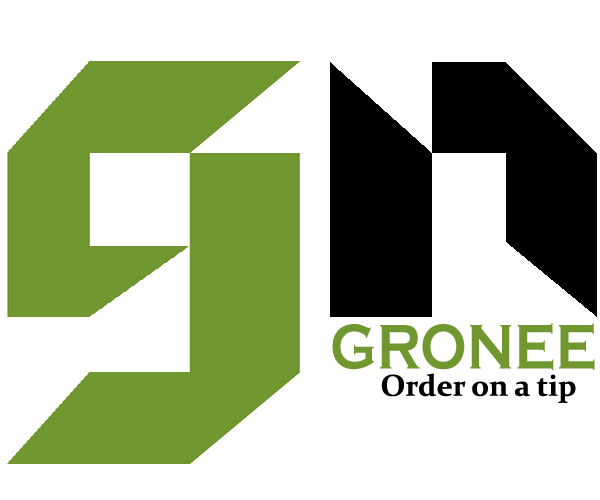
<style>
.page{position:relative;width:600px;height:500px;background:#ffffff}
.page>*{position:absolute;margin:0}
.t1{font:65.5px "CopperplateGothic-Bold";color:#719830;scale:0.83 1}
.t2{font:30px "Constantia-Bold";color:#000000}
</style>
<div class="page">
<p class="t1" style="left:332px;top:323px;width:263px;height:48px">GRONEE</p>
<p class="t2" style="left:381px;top:373px;width:195px;height:30px">Order on a tip</p>
</div>
